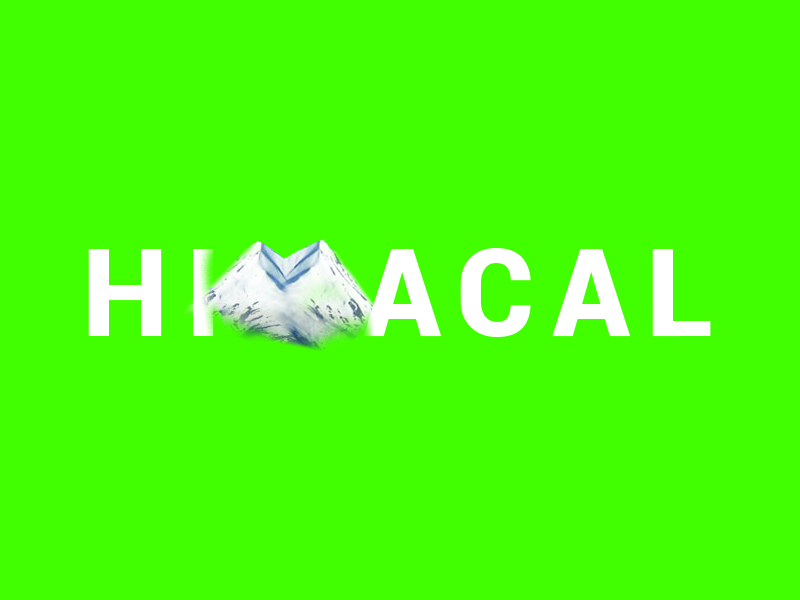
<style>
.page{position:relative;width:800px;height:600px;background:#42ff00}
.page>*{position:absolute;margin:0}
.t1{font:121.8px "Roboto-Black";letter-spacing:0.14em;color:#ffffff}
</style>
<div class="page">
<p class="t1" style="left:88px;top:248px;width:623px;height:89px">HIMACAL</p>
</div>
